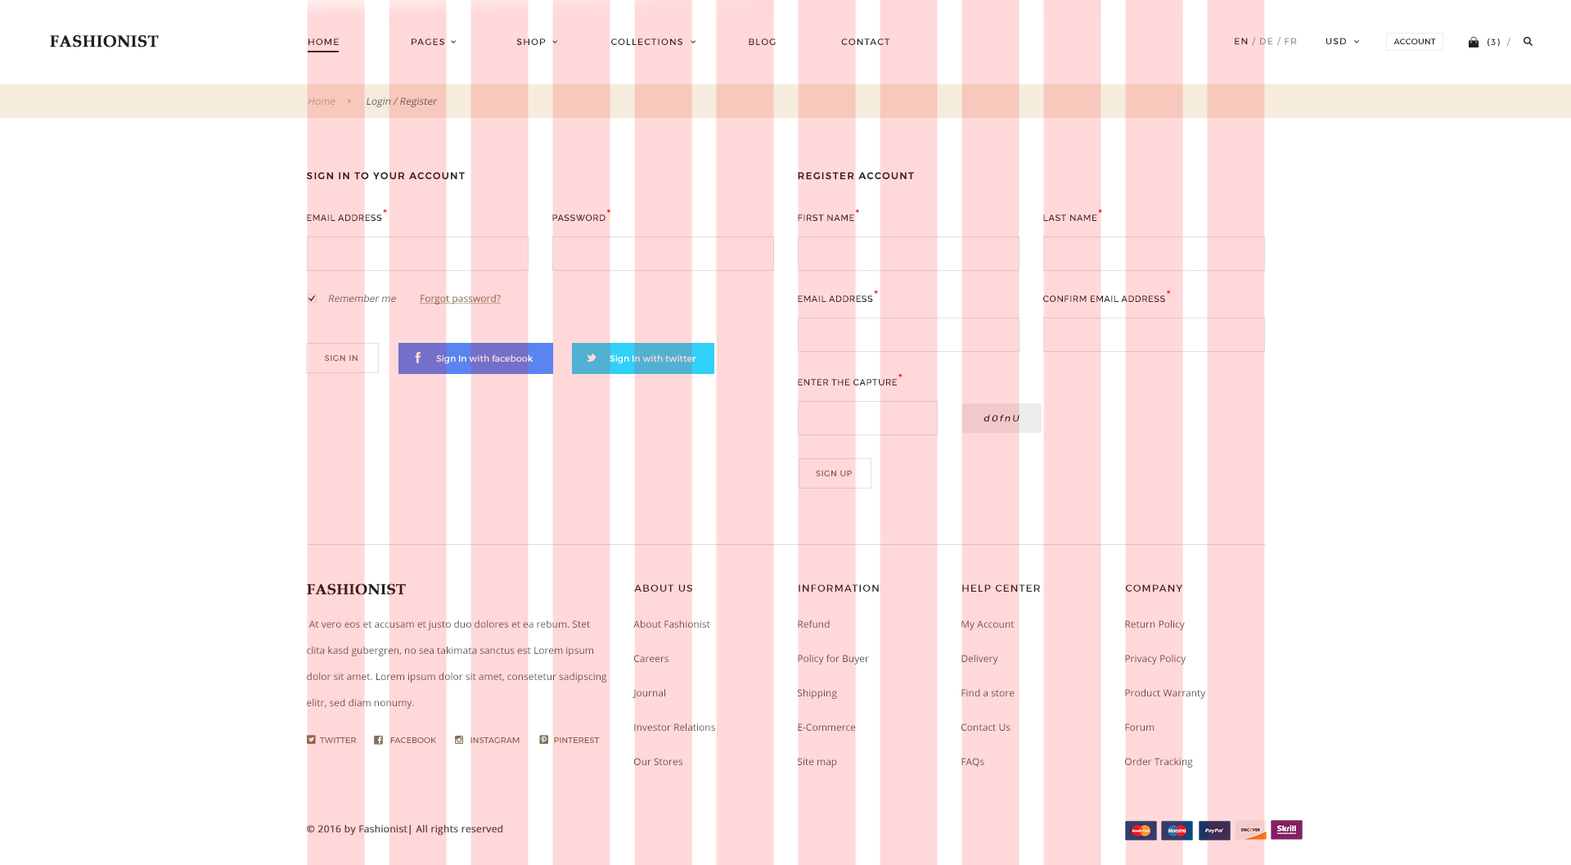
<style>
.page{position:relative;width:1571px;height:865px;background:#ffffff}
.page>*{position:absolute;margin:0}
.t1{font:16.4px "BookAntiqua-Bold";color:#202020;text-transform:uppercase;font-weight:bold}
.t2{font:9px "Montserrat-Regular";letter-spacing:0.1em}
.t3{font:9px "Montserrat-Regular";letter-spacing:0.1em;color:#939393}
.t4{font:9px "Montserrat-Regular";letter-spacing:0.1em;color:#202020}
.t5{font:8.2px "Montserrat-Regular";letter-spacing:0.01em;color:#202020}
.t6{font:9.8px "OpenSans";font-style:italic}
.t7{font:9.8px "Montserrat-SemiBold";letter-spacing:0.1em;color:#411b1b;text-transform:uppercase}
.t8{font:9px "Raleway-SemiBold";letter-spacing:0.05em;text-transform:uppercase}
.t9{font:16.4px "Raleway-SemiBold";letter-spacing:0.05em;text-transform:uppercase}
.t10{font:9px "Raleway-SemiBold";letter-spacing:0.05em;color:#492323;text-transform:uppercase}
.t11{font:16.4px "Raleway-SemiBold";letter-spacing:0.05em;color:#492323;text-transform:uppercase}
.t12{font:9.8px "OpenSans";color:#5f5f5f;font-style:italic}
.t13{font:9.8px "OpenSans";color:#715a33;text-decoration:underline}
.t14{font:8.2px "Montserrat-Regular";letter-spacing:0.05em;color:#736550}
.t15{font:9px "Montserrat-Regular"}
.t16{font:9px "Montserrat-Regular";color:#ffecec}
.t17{font:9px "Montserrat-Regular";letter-spacing:0.2em;color:#3c1616;font-style:italic}
.t18{font:14.7px "BookAntiqua-Bold";color:#411b1b;text-transform:uppercase;font-weight:bold}
.t19{font:9.8px "Montserrat-Regular";letter-spacing:0.1em;color:#411b1b;text-transform:uppercase}
.t20{font:9.8px/26.2px "OpenSans";color:#6f4949}
.t21{font:9.8px/34.4px "OpenSans";color:#6f4949}
.t22{font:8.2px "Montserrat-Regular";color:#80725e;text-transform:uppercase}
.t23{font:9.8px "OpenSans";color:#6f4949;font-weight:bold}
</style>
<div class="page">
<p class="t1" style="left:50px;top:35px;width:109px;height:12px">Fashionist</p>
<p class="t2" style="left:308px;top:38px;width:582px;height:7px">HOME                      PAGES                      SHOP                    COLLECTIONS                    BLOG                    CONTACT</p>
<p class="t3" style="left:1235px;top:37px;width:62px;height:9px"><span class="t4">EN </span>/ DE / FR</p>
<p class="t4" style="left:1325px;top:38px;width:21px;height:7px">USD</p>
<p class="t5" style="left:1393px;top:38px;width:43px;height:7px">ACCOUNT</p>
<p class="t4" style="left:1487px;top:38px;width:23px;height:9px">(3)  /</p>
<p class="t6" style="left:308px;top:97px;width:130px;height:10px">Home            Login / Register</p>
<p class="t7" style="left:306px;top:172px;width:159px;height:7px">sign in to your account</p>
<p class="t7" style="left:798px;top:172px;width:116px;height:7px">register account</p>
<p class="t8" style="left:307px;top:209px;width:80px;height:12px">email address<span class="t9">*</span></p>
<p class="t10" style="left:552px;top:209px;width:58px;height:12px">password<span class="t11">*</span></p>
<p class="t10" style="left:798px;top:209px;width:61px;height:12px">first name<span class="t11">*</span></p>
<p class="t10" style="left:1043px;top:209px;width:59px;height:12px">last name<span class="t11">*</span></p>
<p class="t8" style="left:798px;top:290px;width:80px;height:12px">email address<span class="t9">*</span></p>
<p class="t10" style="left:1043px;top:290px;width:128px;height:12px">confirm email address<span class="t11">*</span></p>
<p class="t12" style="left:328px;top:295px;width:68px;height:7px">Remember me</p>
<p class="t13" style="left:419px;top:295px;width:82px;height:9px">Forgot password?</p>
<p class="t14" style="left:324px;top:355px;width:34px;height:6px">SIGN IN</p>
<p class="t15" style="left:436px;top:354px;width:97px;height:10px">Sign In with facebook</p>
<p class="t16" style="left:610px;top:354px;width:86px;height:10px">Sign In with twitter</p>
<p class="t10" style="left:798px;top:373px;width:104px;height:12px">enter the capture<span class="t11">*</span></p>
<p class="t17" style="left:983px;top:414px;width:36px;height:7px">d0fnU</p>
<p class="t14" style="left:816px;top:470px;width:36px;height:6px">SIGN UP</p>
<p class="t18" style="left:307px;top:583px;width:99px;height:12px">Fashionist</p>
<p class="t19" style="left:634px;top:584px;width:58px;height:8px">about us</p>
<p class="t19" style="left:799px;top:584px;width:80px;height:8px">INFORMATION</p>
<p class="t19" style="left:962px;top:584px;width:78px;height:8px">help center</p>
<p class="t19" style="left:1125px;top:584px;width:57px;height:8px">Company</p>
<p class="t20" style="left:307px;top:620px;width:300px;height:89px">At vero eos et accusam et justo duo dolores et ea rebum. Stet clita kasd gubergren, no sea takimata sanctus est Lorem ipsum dolor sit amet. Lorem ipsum dolor sit amet, consetetur sadipscing elitr, sed diam nonumy.</p>
<p class="t21" style="left:632px;top:620px;width:83px;height:145px">About Fashionist <br>Careers<br>Journal<br>Investor Relations<br>Our Stores</p>
<p class="t21" style="left:797px;top:620px;width:72px;height:147px">Refund<br>Policy for Buyer<br>Shipping<br>E-Commerce<br>Site map</p>
<p class="t21" style="left:961px;top:620px;width:54px;height:147px">My Account<br>Delivery<br>Find a store<br>Contact Us<br>FAQs</p>
<p class="t21" style="left:1125px;top:620px;width:81px;height:147px">Return Policy<br>Privacy Policy<br>Product Warranty<br>Forum<br>Order Tracking</p>
<p class="t22" style="left:320px;top:737px;width:280px;height:6px">TWITTER                FACEBOOK                INSTAGRAM                PINTEREST</p>
<p class="t23" style="left:307px;top:825px;width:196px;height:10px">© 2016 by Fashionist| All rights reserved</p>
</div>
